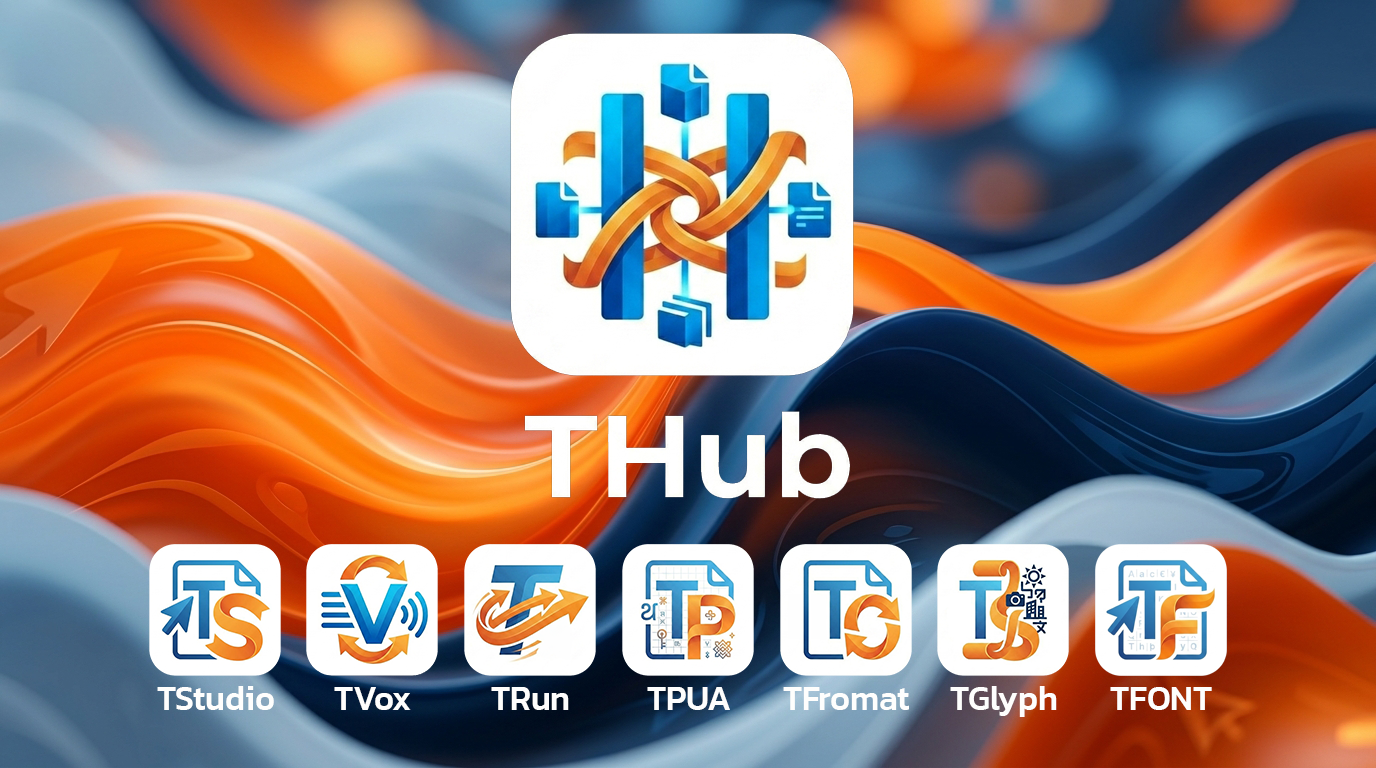
<style>
.page{position:relative;width:1376px;height:768px}
.page>*{position:absolute;margin:0}
.t1{font:33.6px "Kanit-Medium";color:#fefefd}
</style>
<div class="page">
<p class="t1" style="left:157px;top:686px;width:117px;height:24px">TStudio</p>
<p class="t1" style="left:334px;top:687px;width:77px;height:23px">TVox</p>
<p class="t1" style="left:491px;top:687px;width:78px;height:23px">TRun</p>
<p class="t1" style="left:647px;top:687px;width:83px;height:23px">TPUA</p>
<p class="t1" style="left:783px;top:687px;width:126px;height:23px">TFromat</p>
<p class="t1" style="left:950px;top:686px;width:107px;height:31px">TGlyph</p>
<p class="t1" style="left:1110px;top:687px;width:102px;height:23px">TFONT</p>
</div>
